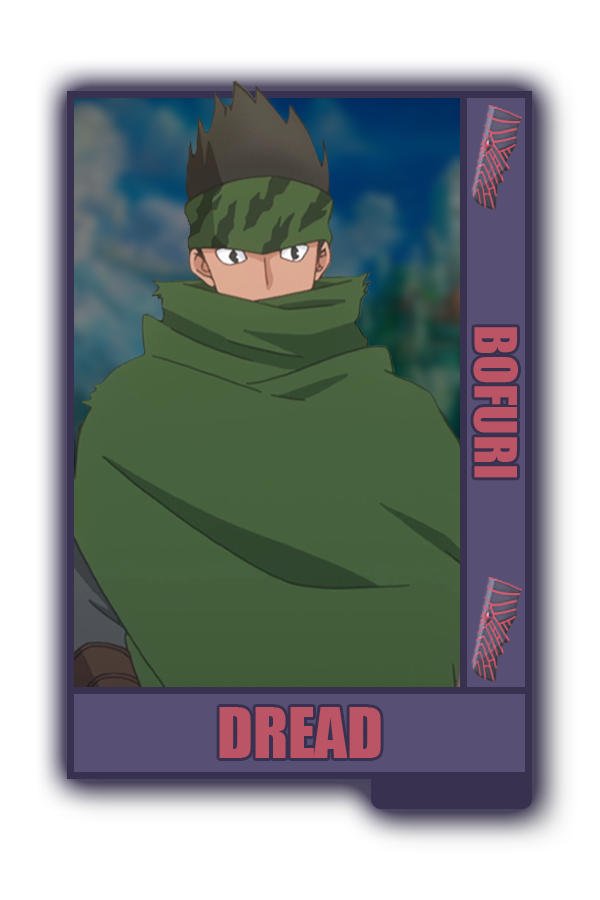
<style>
.page{position:relative;width:600px;height:900px;background:#ffffff}
.page>*{position:absolute;margin:0}
.t1{font:53.6px "Impact";color:#bb5464}
.t2{font:64.6px "Impact";color:#bb5464}
</style>
<div class="page">
<p class="t1" style="left:473px;top:327px;width:45px;height:151px;rotate:90deg">BOFURI</p>
<p class="t2" style="left:219px;top:707px;width:162px;height:51px">DREAD</p>
</div>
